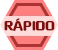
<style>
.page{position:relative;width:58px;height:50px;background:#ffffff}
.page>*{position:absolute;margin:0}
.t1{font:11.2px "AokaneStd-EB";letter-spacing:-0.03em;color:#7e0e0e;font-weight:bold;scale:1.09 1}
</style>
<div class="page">
<p class="t1" style="left:4px;top:18px;width:51px;height:13px">RÁPIDO</p>
</div>
